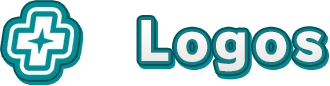
<style>
.page{position:relative;width:330px;height:86px;background:#ffffff}
.page>*{position:absolute;margin:0}
.t1{font:52px "RodinPro-EB";letter-spacing:0.101em;color:#f1f2f2}
</style>
<div class="page">
<p class="t1" style="left:141px;top:20px;width:181px;height:52px">Logos</p>
</div>
